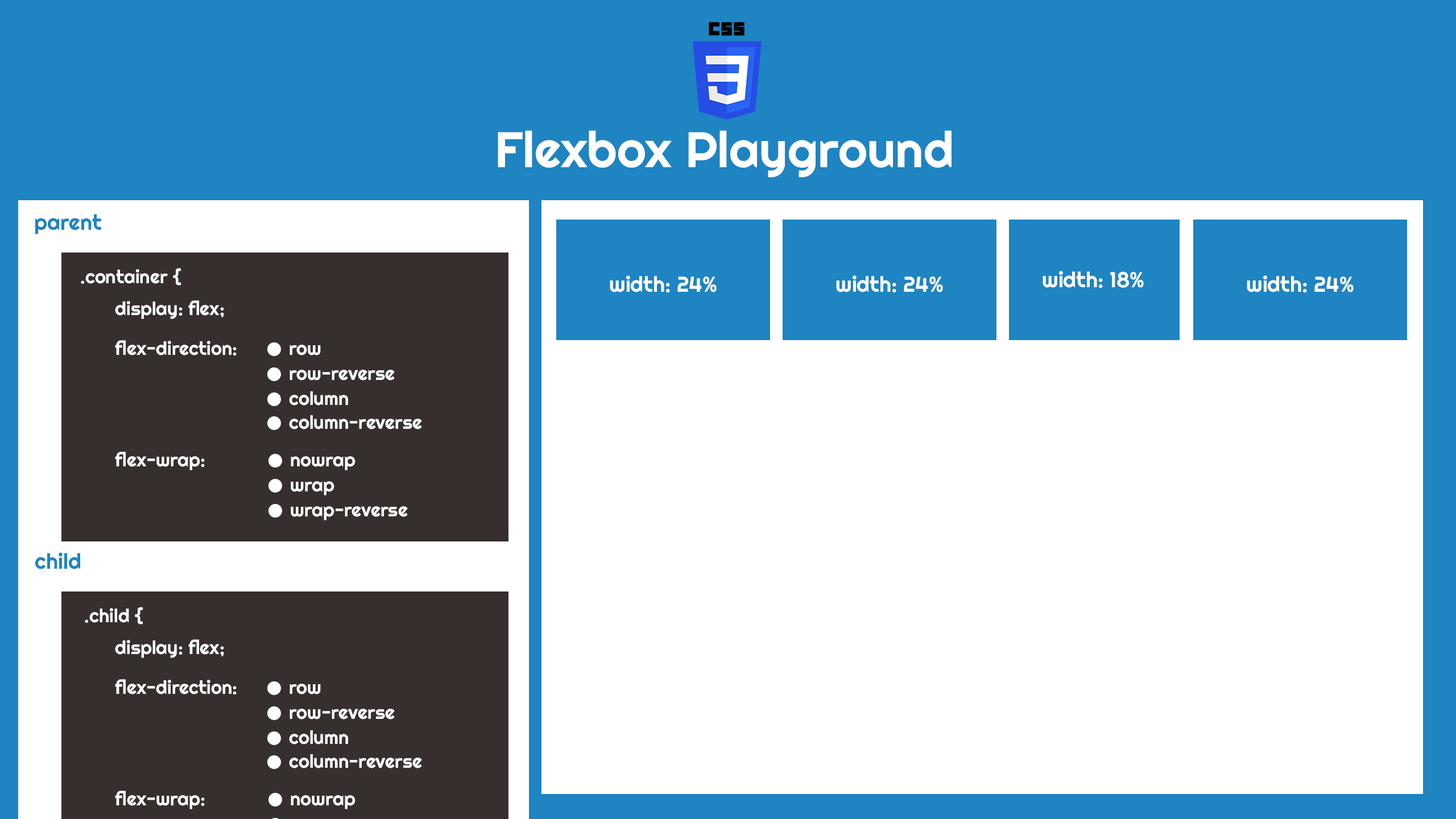
<style>
.page{position:relative;width:1456px;height:819px;background:#ffffff}
.page>*{position:absolute;margin:0}
.t1{font:49.9px "Righteous-Regular";color:#ffffff}
.t2{font:21.4px "Righteous-Regular";color:#1e84c2}
.t3{font:18.6px "Righteous-Regular";color:#ffffff}
.t4{font:21.4px "Righteous-Regular";color:#ffffff}
</style>
<div class="page">
<p class="t1" style="left:498px;top:130px;width:454px;height:47px">Flexbox Playground</p>
<p class="t2" style="left:35px;top:214px;width:66px;height:20px">parent</p>
<p class="t3" style="left:81px;top:268px;width:100px;height:18px">.container {</p>
<p class="t4" style="left:610px;top:275px;width:107px;height:18px">width: 24%</p>
<p class="t4" style="left:836px;top:275px;width:107px;height:18px">width: 24%</p>
<p class="t4" style="left:1043px;top:271px;width:101px;height:17px">width: 18%</p>
<p class="t4" style="left:1247px;top:275px;width:107px;height:18px">width: 24%</p>
<p class="t3" style="left:115px;top:300px;width:109px;height:19px">display: flex;</p>
<p class="t3" style="left:115px;top:340px;width:122px;height:15px">flex-direction:</p>
<p class="t3" style="left:289px;top:345px;width:32px;height:10px">row</p>
<p class="t3" style="left:289px;top:370px;width:106px;height:10px">row-reverse</p>
<p class="t3" style="left:289px;top:391px;width:59px;height:15px">column</p>
<p class="t3" style="left:289px;top:415px;width:133px;height:14px">column-reverse</p>
<p class="t3" style="left:115px;top:452px;width:90px;height:18px">flex-wrap:</p>
<p class="t3" style="left:291px;top:456px;width:64px;height:14px">nowrap</p>
<p class="t3" style="left:291px;top:481px;width:43px;height:14px">wrap</p>
<p class="t3" style="left:291px;top:506px;width:117px;height:14px">wrap-reverse</p>
<p class="t2" style="left:35px;top:552px;width:45px;height:17px">child</p>
<p class="t3" style="left:85px;top:607px;width:58px;height:17px">.child {</p>
<p class="t3" style="left:115px;top:639px;width:109px;height:19px">display: flex;</p>
<p class="t3" style="left:115px;top:679px;width:122px;height:15px">flex-direction:</p>
<p class="t3" style="left:289px;top:684px;width:32px;height:10px">row</p>
<p class="t3" style="left:289px;top:709px;width:106px;height:10px">row-reverse</p>
<p class="t3" style="left:289px;top:730px;width:59px;height:14px">column</p>
<p class="t3" style="left:289px;top:754px;width:133px;height:14px">column-reverse</p>
<p class="t3" style="left:115px;top:791px;width:90px;height:18px">flex-wrap:</p>
<p class="t3" style="left:291px;top:795px;width:64px;height:14px">nowrap</p>
</div>
